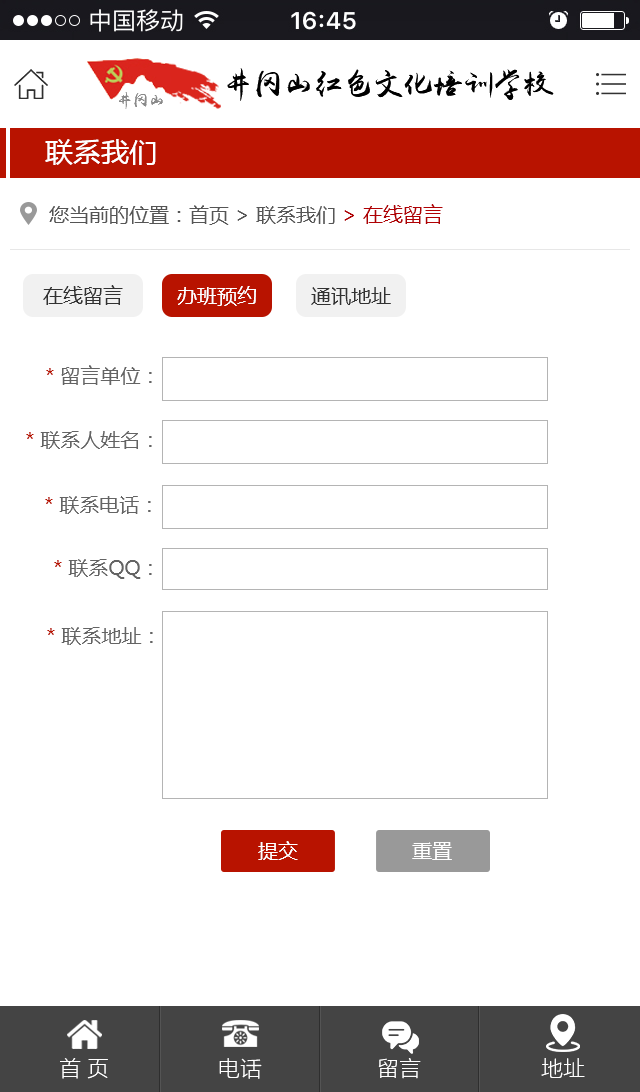
<style>
.page{position:relative;width:640px;height:1092px;background:#ffffff}
.page>*{position:absolute;margin:0}
.t1{font:28px "MicrosoftYaHei";color:#ffffff}
.t2{font:20px "MicrosoftYaHei";color:#555555}
.t3{font:20px "MicrosoftYaHei";color:#b00104}
.t4{font:20px "MicrosoftYaHei";color:#323232}
.t5{font:20px "MicrosoftYaHei";color:#ffffff}
.t6{font:20px "MicrosoftYaHei";color:#646464}
.t7{font:20px "MicrosoftYaHei";color:#b81300}
.t8{font:22px "FZLTKHK--GBK1-0";color:#ffffff}
</style>
<div class="page">
<p class="t1" style="left:45px;top:139px;width:111px;height:26px">联系我们</p>
<p class="t2" style="left:49px;top:204px;width:394px;height:21px">您当前的位置：首页 &gt; 联系我们<span class="t3"> &gt; 在线留言</span></p>
<p class="t4" style="left:43px;top:285px;width:348px;height:21px">在线留言         <span class="t5">办班预约</span>         通讯地址</p>
<p class="t6" style="left:46px;top:365px;width:106px;height:20px"><span class="t7">* </span>留言单位：</p>
<p class="t6" style="left:26px;top:431px;width:126px;height:18px"><span class="t7">* </span>联系人姓名：</p>
<p class="t6" style="left:45px;top:496px;width:106px;height:18px"><span class="t7">* </span>联系电话：</p>
<p class="t6" style="left:54px;top:559px;width:98px;height:20px"><span class="t7">* </span>联系QQ：</p>
<p class="t6" style="left:47px;top:627px;width:106px;height:18px"><span class="t7">* </span>联系地址：</p>
<p class="t5" style="left:258px;top:841px;width:40px;height:19px">提交</p>
<p class="t5" style="left:412px;top:842px;width:40px;height:18px">重置</p>
<p class="t8" style="left:60px;top:1058px;width:48px;height:21px">首 页</p>
<p class="t8" style="left:219px;top:1058px;width:43px;height:21px">电话</p>
<p class="t8" style="left:378px;top:1058px;width:43px;height:21px">留言</p>
<p class="t8" style="left:541px;top:1058px;width:44px;height:20px">地址</p>
</div>
